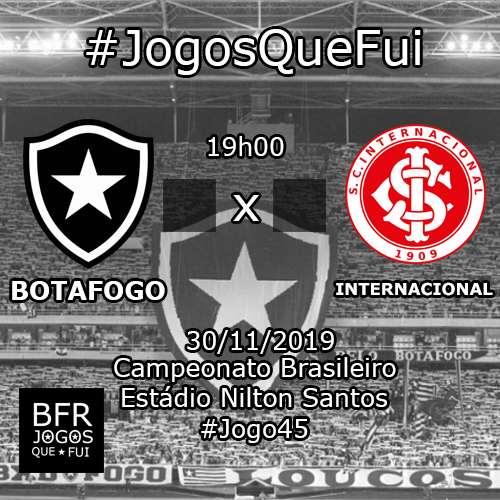
<style>
.page{position:relative;width:500px;height:500px}
.page>*{position:absolute;margin:0}
.t1{font:48px "Verdana";color:#ffffff}
.t2{font:25px "Verdana";color:#ffffff}
.t3{font:25px "Verdana-Bold";color:#ffffff}
.t4{font:16.4px "Verdana-Bold";color:#ffffff}
</style>
<div class="page">
<p class="t1" style="left:86px;top:29px;width:335px;height:46px">#JogosQueFui</p>
<p class="t2" style="left:208px;top:136px;width:76px;height:20px">19h00</p>
<p class="t1" style="left:233px;top:195px;width:26px;height:26px">x</p>
<p class="t3" style="left:12px;top:281px;width:153px;height:19px">BOTAFOGO</p>
<p class="t4" style="left:336px;top:282px;width:157px;height:14px">INTERNACIONAL</p>
<p class="t2" style="left:187px;top:330px;width:147px;height:24px">30/11/2019</p>
<p class="t2" style="left:114px;top:357px;width:282px;height:25px">Campeonato Brasileiro</p>
<p class="t2" style="left:122px;top:386px;width:265px;height:21px">Estádio Nilton Santos</p>
<p class="t2" style="left:201px;top:419px;width:107px;height:24px">#Jogo45</p>
</div>
